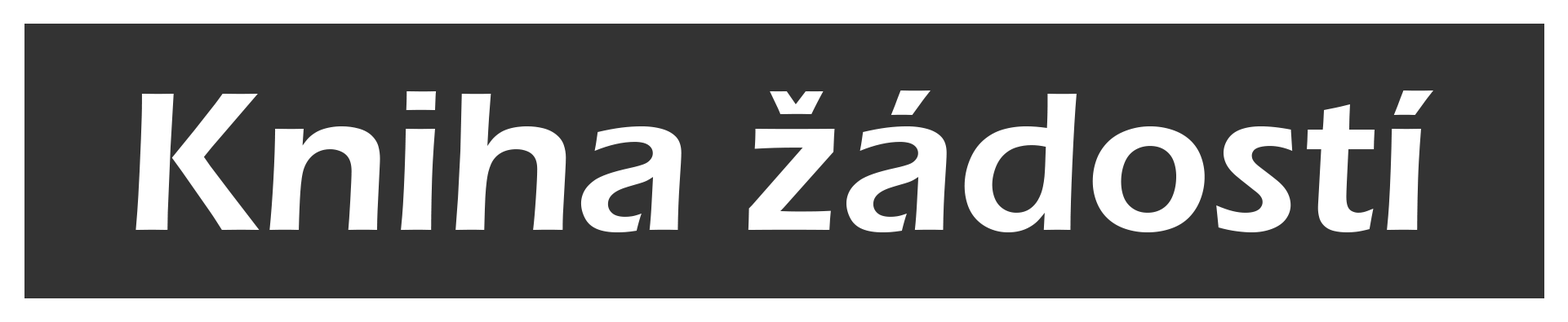
<style>
.page{position:relative;width:1568px;height:322px;background:#333333}
.page>*{position:absolute;margin:0}
.t1{font:204.1px "ErasITC-Demi";color:#ffffff}
</style>
<div class="page">
<p class="t1" style="left:135px;top:91px;width:1298px;height:142px">Kniha žádostí</p>
</div>
